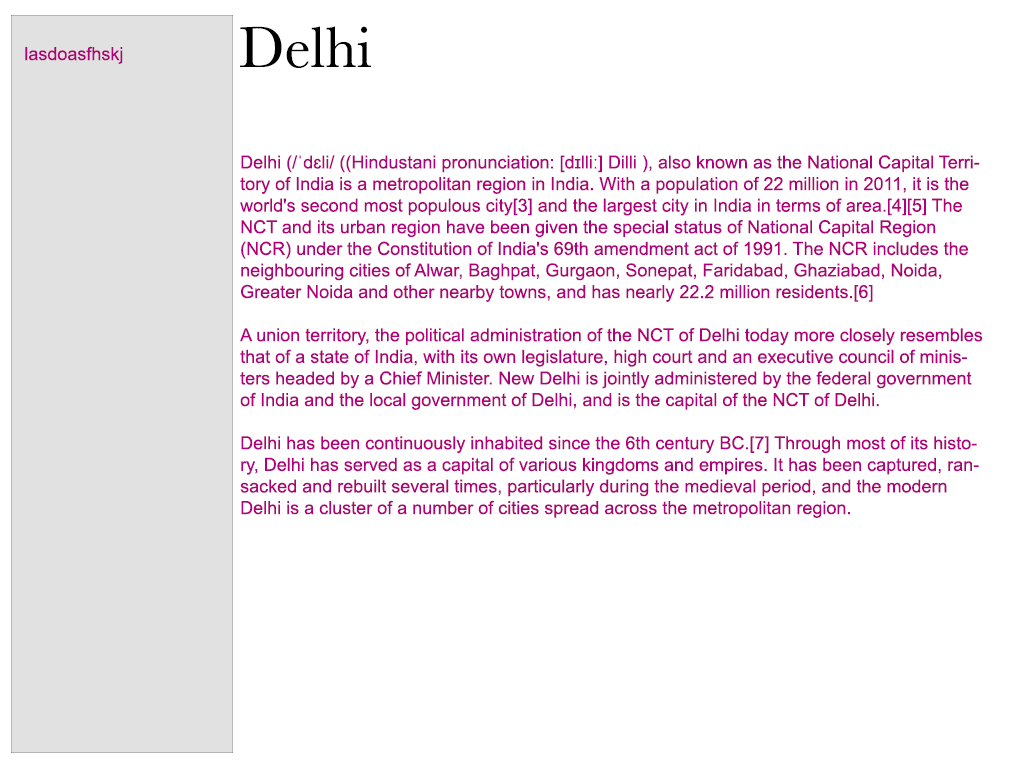
<style>
.page{position:relative;width:1024px;height:768px;background:#ffffff}
.page>*{position:absolute;margin:0}
.t1{font:60px "Baskerville";color:#000000}
.t2{font:18px "ArialMT";color:#b0007a}
</style>
<div class="page">
<p class="t1" style="left:240px;top:26px;width:131px;height:42px">Delhi</p>
<p class="t2" style="left:25px;top:46px;width:98px;height:18px">lasdoasfhskj</p>
<p class="t2" style="left:240px;top:155px;width:743px;height:363px">Delhi (/ˈdɛli/ ((Hindustani pronunciation: [d̪ɪlliː] Dilli ), also known as the National Capital Territory of India is a metropolitan region in India. With a population of 22 million in 2011, it is the world's second most populous city[3] and the largest city in India in terms of area.[4][5] The NCT and its urban region have been given the special status of National Capital Region (NCR) under the Constitution of India's 69th amendment act of 1991. The NCR includes the neighbouring cities of Alwar, Baghpat, Gurgaon, Sonepat, Faridabad, Ghaziabad, Noida, Greater Noida and other nearby towns, and has nearly 22.2 million residents.[6]<br><br>A union territory, the political administration of the NCT of Delhi today more closely resembles that of a state of India, with its own legislature, high court and an executive council of ministers headed by a Chief Minister. New Delhi is jointly administered by the federal government of India and the local government of Delhi, and is the capital of the NCT of Delhi.<br><br>Delhi has been continuously inhabited since the 6th century BC.[7] Through most of its history, Delhi has served as a capital of various kingdoms and empires. It has been captured, ransacked and rebuilt several times, particularly during the medieval period, and the modern Delhi is a cluster of a number of cities spread across the metropolitan region.</p>
</div>
